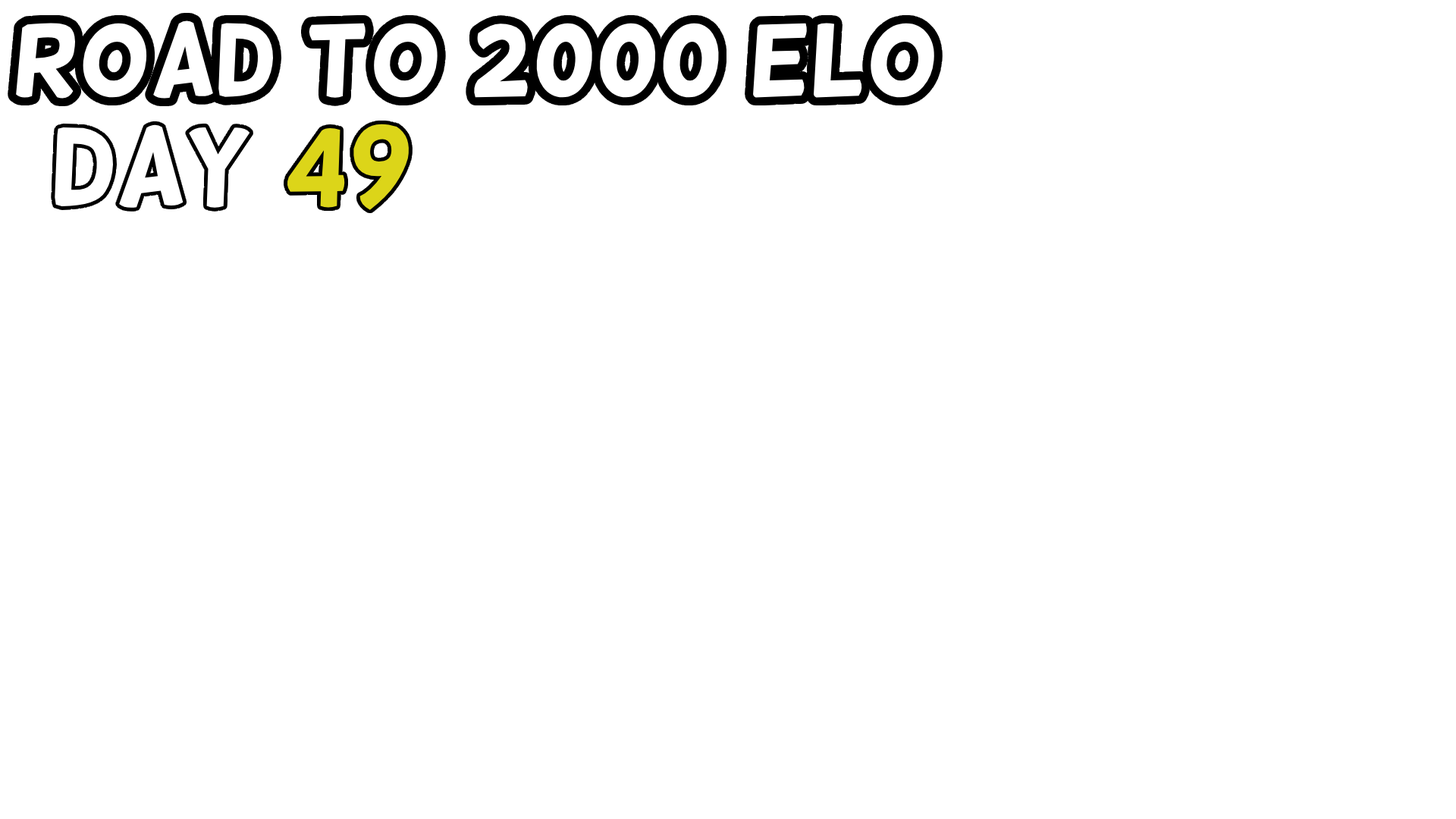
<style>
.page{position:relative;width:1456px;height:819px;background:#ffffff}
.page>*{position:absolute;margin:0}
.t1{font:99.9px "Helsinki";color:#ffffff}
</style>
<div class="page">
<p class="t1" style="left:16px;top:18px;width:920px;height:83px">Road to 2000 Elo</p>
</div>
